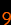
<style>
.page{position:relative;width:11px;height:25px;background:#000000}
.page>*{position:absolute;margin:0}
.t1{font:18px "Quicksand-Regular";color:#ff6600}
</style>
<div class="page">
<p class="t1" style="left:2px;top:12px;width:9px;height:13px">9</p>
</div>
